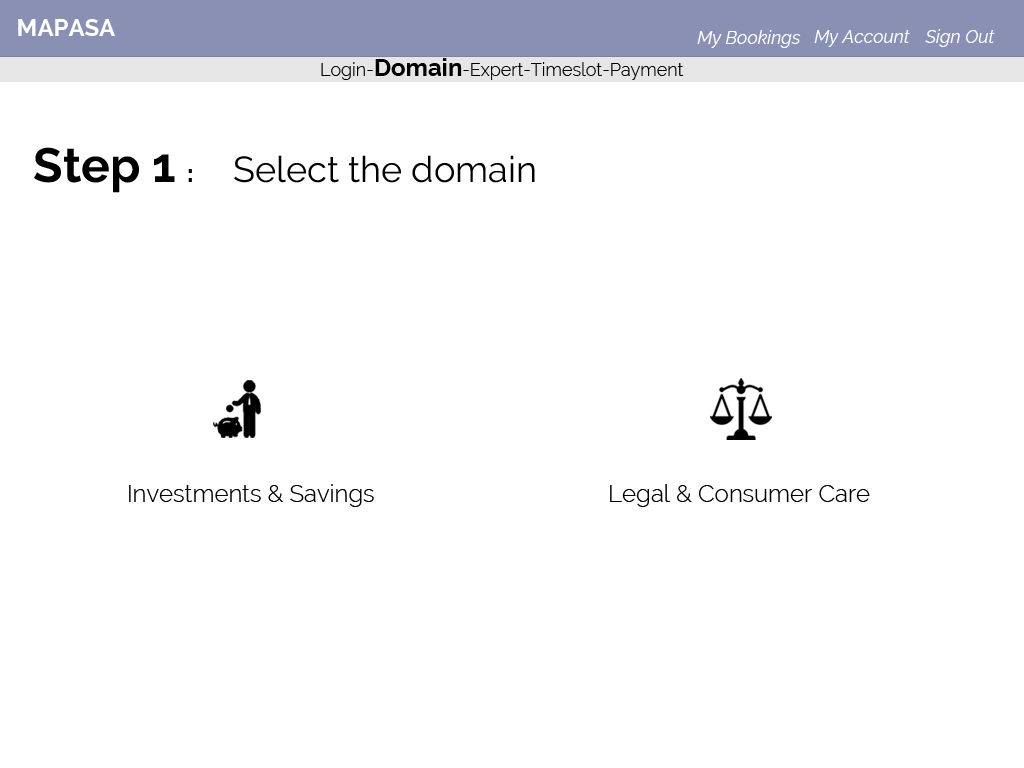
<style>
.page{position:relative;width:1024px;height:768px;background:#ffffff}
.page>*{position:absolute;margin:0}
.t1{font:24px "Raleway-Bold";color:#ffffff}
.t2{font:18px "Raleway-Italic";color:#ffffff}
.t3{font:18px "Raleway-Light";color:#000000}
.t4{font:24px "Raleway-Bold";color:#000000}
.t5{font:36px "Raleway-Regular";color:#000000}
.t6{font:48px "Raleway-Bold";color:#000000}
.t7{font:24px "Raleway-ExtraBold";color:#000000}
.t8{font:24px "Raleway-Light";color:#000000}
</style>
<div class="page">
<p class="t1" style="left:18px;top:19px;width:97px;height:17px">MAPASA</p>
<p class="t2" style="left:697px;top:30px;width:104px;height:18px">My Bookings</p>
<p class="t2" style="left:814px;top:30px;width:96px;height:17px">My Account</p>
<p class="t2" style="left:925px;top:29px;width:70px;height:18px">Sign Out</p>
<p class="t3" style="left:321px;top:58px;width:363px;height:22px">Login-<span class="t4">Domain</span>-Expert-Timeslot-Payment</p>
<p class="t5" style="left:34px;top:147px;width:501px;height:46px"><span class="t6">Step 1 </span><span class="t7">:       </span>Select the domain</p>
<p class="t8" style="left:129px;top:484px;width:245px;height:23px">Investments &amp; Savings</p>
<p class="t8" style="left:610px;top:484px;width:260px;height:23px">Legal &amp; Consumer Care</p>
</div>
